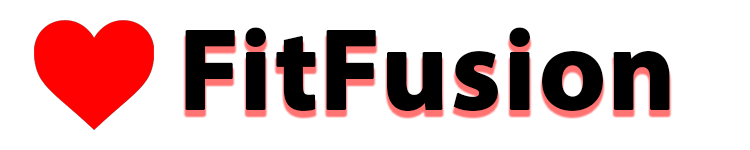
<style>
.page{position:relative;width:750px;height:150px;background:#ffffff}
.page>*{position:absolute;margin:0}
.t1{font:115.1px "MyriadPro-Bold";color:#000000;font-weight:bold}
</style>
<div class="page">
<p class="t1" style="left:185px;top:27px;width:485px;height:84px">FitFusion</p>
</div>
